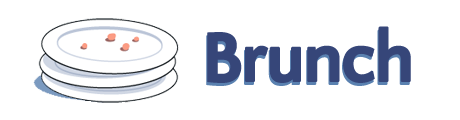
<style>
.page{position:relative;width:460px;height:120px;background:#ffffff}
.page>*{position:absolute;margin:0}
.t1{font:72px "QuattrocentoSans-Bold";letter-spacing:-0.05em;color:#364679;font-weight:bold}
</style>
<div class="page">
<p class="t1" style="left:207px;top:26px;width:204px;height:57px">Brunch</p>
</div>
